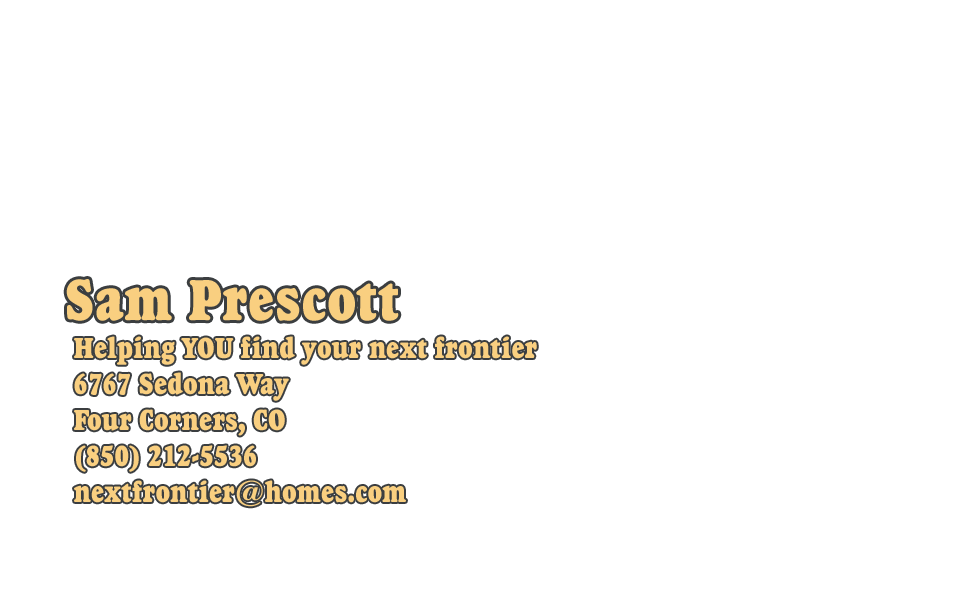
<style>
.page{position:relative;width:980px;height:614px;background:#ffffff}
.page>*{position:absolute;margin:0}
.t1{font:60px "GoudyHeavyfaceBT-RegularCond";color:#f9cf80}
.t2{font:30px/36px "GoudyHeavyfaceBT-RegularCond";color:#f9cf80}
</style>
<div class="page">
<p class="t1" style="left:66px;top:279px;width:333px;height:42px">Sam Prescott</p>
<p class="t2" style="left:74px;top:336px;width:463px;height:171px">Helping YOU find your next frontier<br>6767 Sedona Way<br>Four Corners, CO<br>(850) 212-5536<br>nextfrontier@homes.com</p>
</div>
